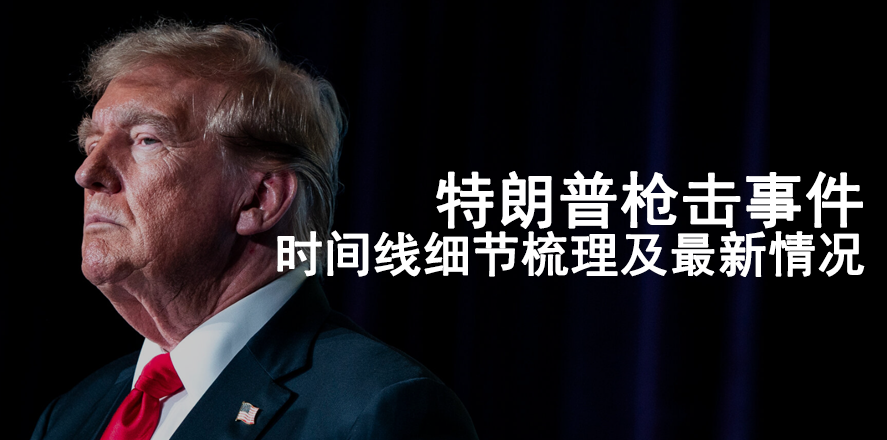
<style>
.page{position:relative;width:887px;height:440px;background:#000000}
.page>*{position:absolute;margin:0}
.t1{font:48px/60px "SimHei";color:#ffffff;font-weight:bold}
.t2{font:60px/60px "SimHei";color:#ffffff;font-weight:bold}
</style>
<div class="page">
<p class="t1" style="left:277px;top:170px;width:588px;height:107px;text-align:right"><span class="t2">特朗普枪击事件<br></span>时间线细节梳理及最新情况</p>
</div>
